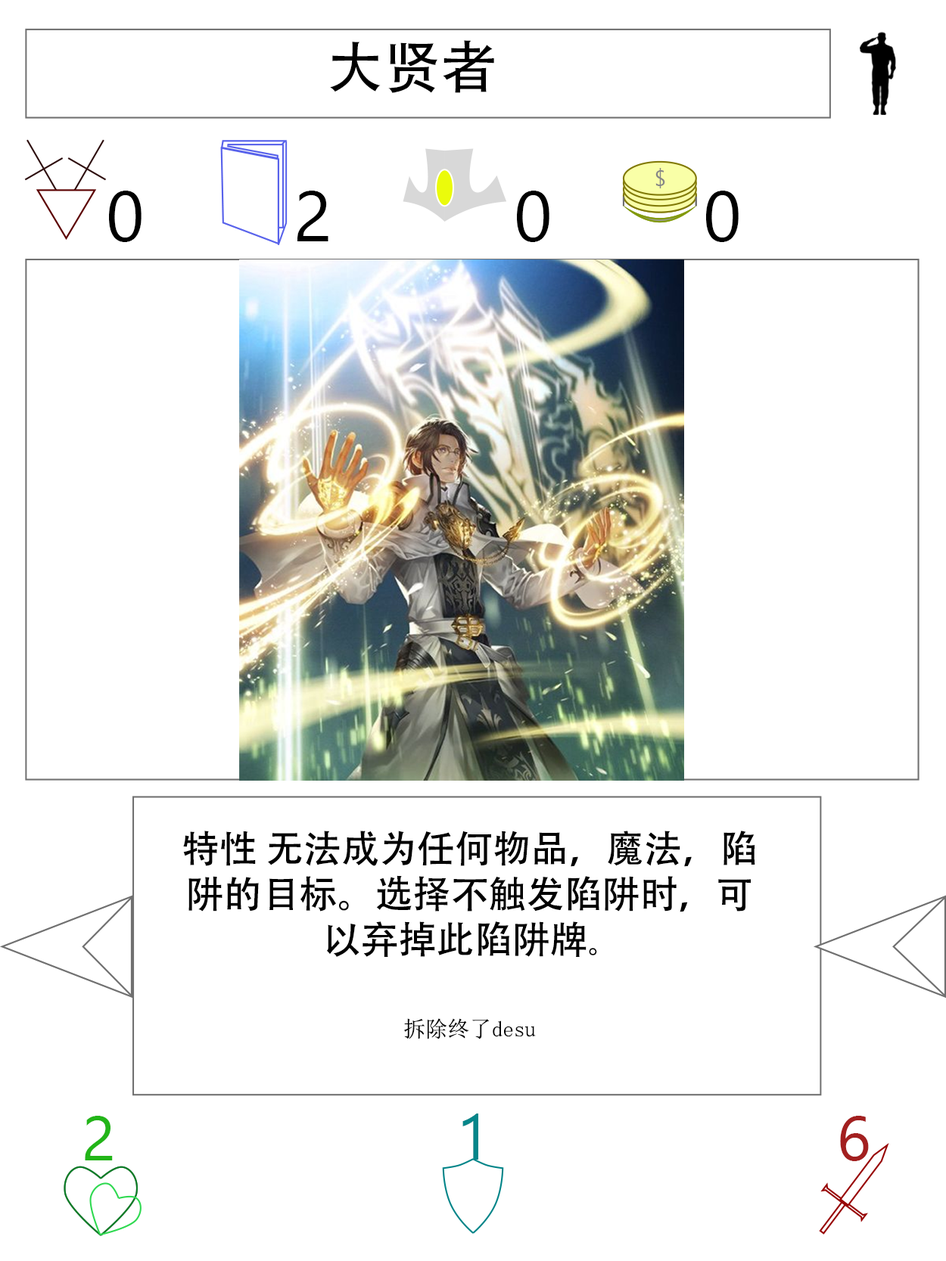
<style>
.page{position:relative;width:946px;height:1261px;background:#ffffff}
.page>*{position:absolute;margin:0}
.t1{font:56.7px "AdobeHeitiStd-Regular";color:#000000}
.t2{font:70.9px "SegoeUI";color:#000000}
.t3{font:37.8px "AdobeHeitiStd-Regular";color:#000000}
.t4{font:28.4px "AdobeHeitiStd-Regular";color:#000000}
.t5{font:22.1px "NSimSun";color:#000000}
.t6{font:63px "SegoeUI";color:#22b518}
.t7{font:64.6px "SegoeUI";color:#05868a}
.t8{font:63px "SegoeUI";color:#a32020}
</style>
<div class="page">
<p class="t1" style="left:330px;top:40px;width:164px;height:53px">大贤者</p>
<p class="t2" style="left:109px;top:191px;width:32px;height:51px">0</p>
<p class="t2" style="left:297px;top:191px;width:31px;height:50px">2</p>
<p class="t2" style="left:517px;top:191px;width:32px;height:51px">0</p>
<p class="t2" style="left:706px;top:191px;width:32px;height:51px">0</p>
<p class="t3" style="left:183px;top:831px;width:572px;height:208px;text-align:center">特性 无法成为任何物品，魔法，陷阱的目标。选择不触发陷阱时，可以弃掉此陷阱牌<span class="t4">。<br><br></span><span class="t5">拆除终了desu</span></p>
<p class="t6" style="left:85px;top:1116px;width:28px;height:44px">2</p>
<p class="t7" style="left:462px;top:1114px;width:16px;height:46px">1</p>
<p class="t8" style="left:840px;top:1116px;width:28px;height:45px">6</p>
</div>
